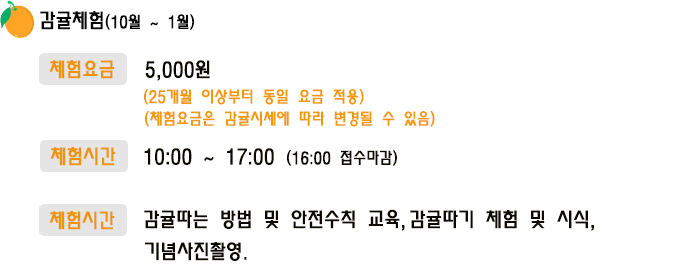
<style>
.page{position:relative;width:700px;height:275px;background:#ffffff}
.page>*{position:absolute;margin:0}
.t1{font:16px "MoeumTR-HM";color:#060606}
.t2{font:20px "MoeumTR-HM";color:#060606}
.t3{font:20px "MoeumTR-HM";color:#ef9406}
.t4{font:20px "MoeumTR-HM";color:#0d0801}
.t5{font:16px "MoeumTR-HM";color:#f59805}
.t6{font:16px "MoeumTR-HM";color:#0d0801}
</style>
<div class="page">
<p class="t1" style="left:40px;top:11px;width:154px;height:19px"><span class="t2">감귤체험</span>(10월 ~ 1월)</p>
<p class="t3" style="left:49px;top:60px;width:65px;height:19px">체험요금</p>
<p class="t4" style="left:145px;top:60px;width:65px;height:21px">5,000원</p>
<p class="t5" style="left:144px;top:89px;width:220px;height:16px">(25개월 이상부터 동일 요금 적용)</p>
<p class="t5" style="left:145px;top:111px;width:290px;height:16px">(체험요금은 감귤시세에 따라 변경될 수 있음)</p>
<p class="t3" style="left:50px;top:147px;width:66px;height:19px">체험시간</p>
<p class="t4" style="left:144px;top:148px;width:253px;height:18px">10:00 ~ 17:00 <span class="t6">(16:00 접수마감)</span></p>
<p class="t4" style="left:144px;top:209px;width:261px;height:22px">감귤따는 방법 및 안전수칙 교육,</p>
<p class="t3" style="left:49px;top:211px;width:66px;height:19px">체험시간</p>
<p class="t4" style="left:410px;top:210px;width:184px;height:21px">감귤따기 체험 및 시식,</p>
<p class="t4" style="left:145px;top:242px;width:102px;height:19px">기념사진촬영.</p>
</div>
